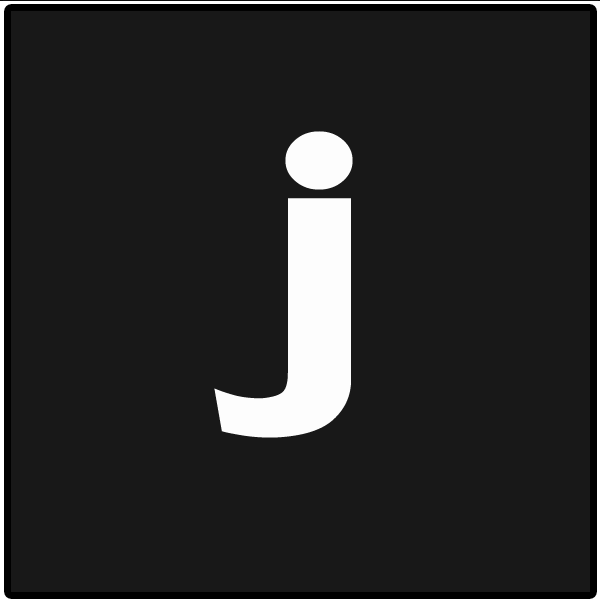
<style>
.page{position:relative;width:600px;height:600px;background:#181818}
.page>*{position:absolute;margin:0}
.t1{font:500px "LilyUPCBold";color:#fdfdfd}
</style>
<div class="page">
<p class="t1" style="left:214px;top:130px;width:139px;height:307px">j</p>
</div>
